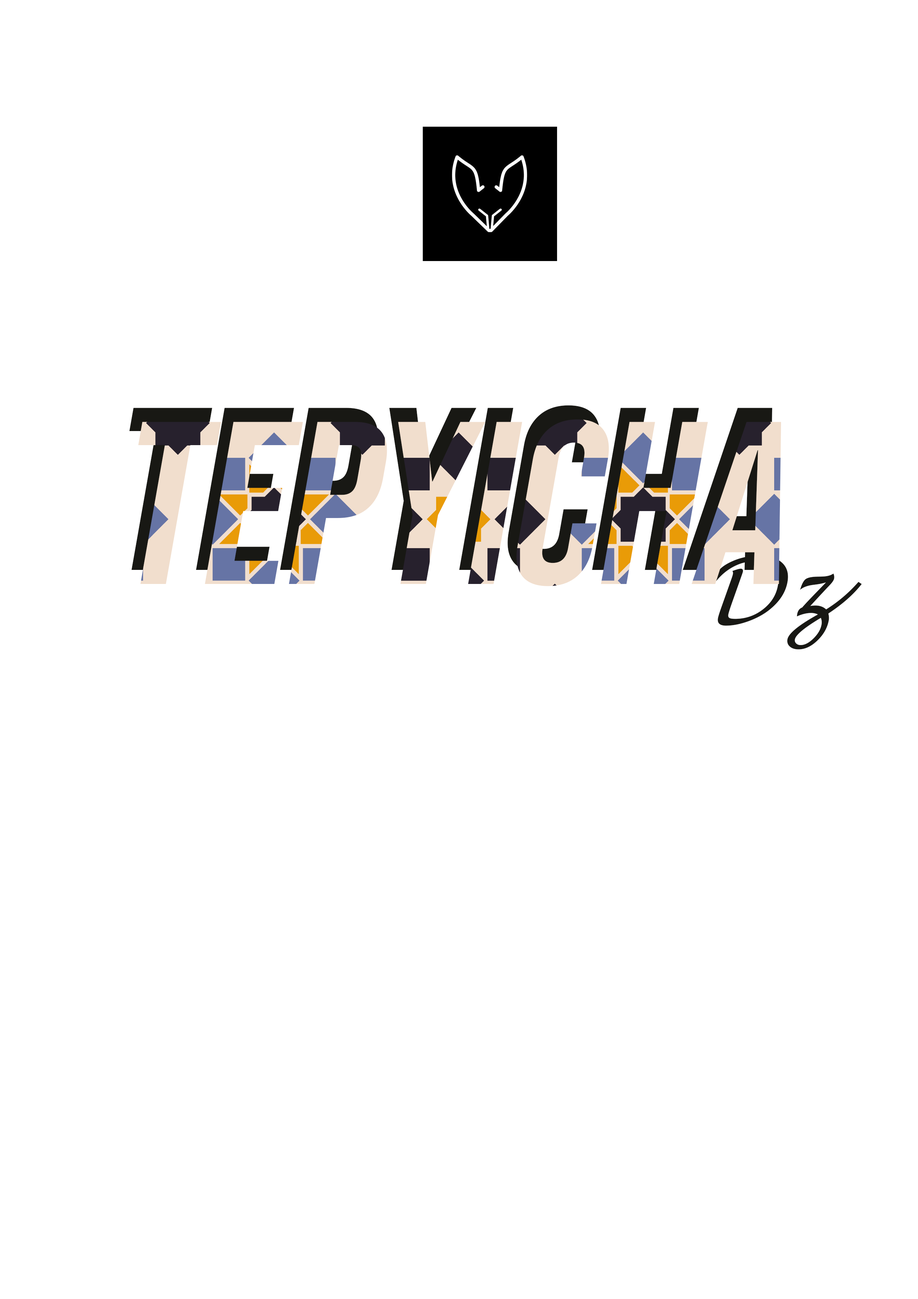
<style>
.page{position:relative;width:918px;height:1299px;background:#ffffff}
.page>*{position:absolute;margin:0}
.t1{font:231.4px "BebasNeue-Regular";font-style:italic}
.t2{font:88.4px "LucidaHandwriting-Italic";color:#181814;font-style:italic}
</style>
<div class="page">
<p class="t1" style="left:129px;top:405px;width:644px;height:167px">Tepyicha</p>
<p class="t2" style="left:716px;top:555px;width:146px;height:94px;rotate:-1deg">Dz</p>
</div>
